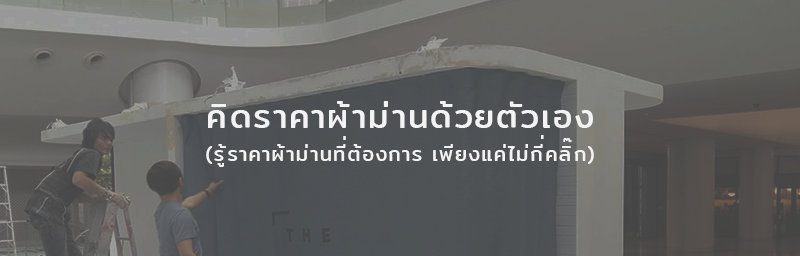
<style>
.page{position:relative;width:800px;height:256px}
.page>*{position:absolute;margin:0}
.t1{font:20px/33.3px "Mitr-Regular";letter-spacing:0.05em;color:#f3f3f3}
.t2{font:33.3px/33.3px "Mitr-Regular";letter-spacing:0.05em;color:#f3f3f3}
.t3{font:20px/33.3px "Mitr-Regular";letter-spacing:0.03em;color:#f3f3f3}
</style>
<div class="page">
<p class="t1" style="left:206px;top:101px;width:388px;height:66px;text-align:center"><span class="t2">คิดราคาผ้าม่านด้วยตัวเอง<br></span>(รู้ราคาผ้าม่านที่ต้องการ เพียงแค่ไม่กี<span class="t3">่</span>คลิ๊ก)</p>
</div>
